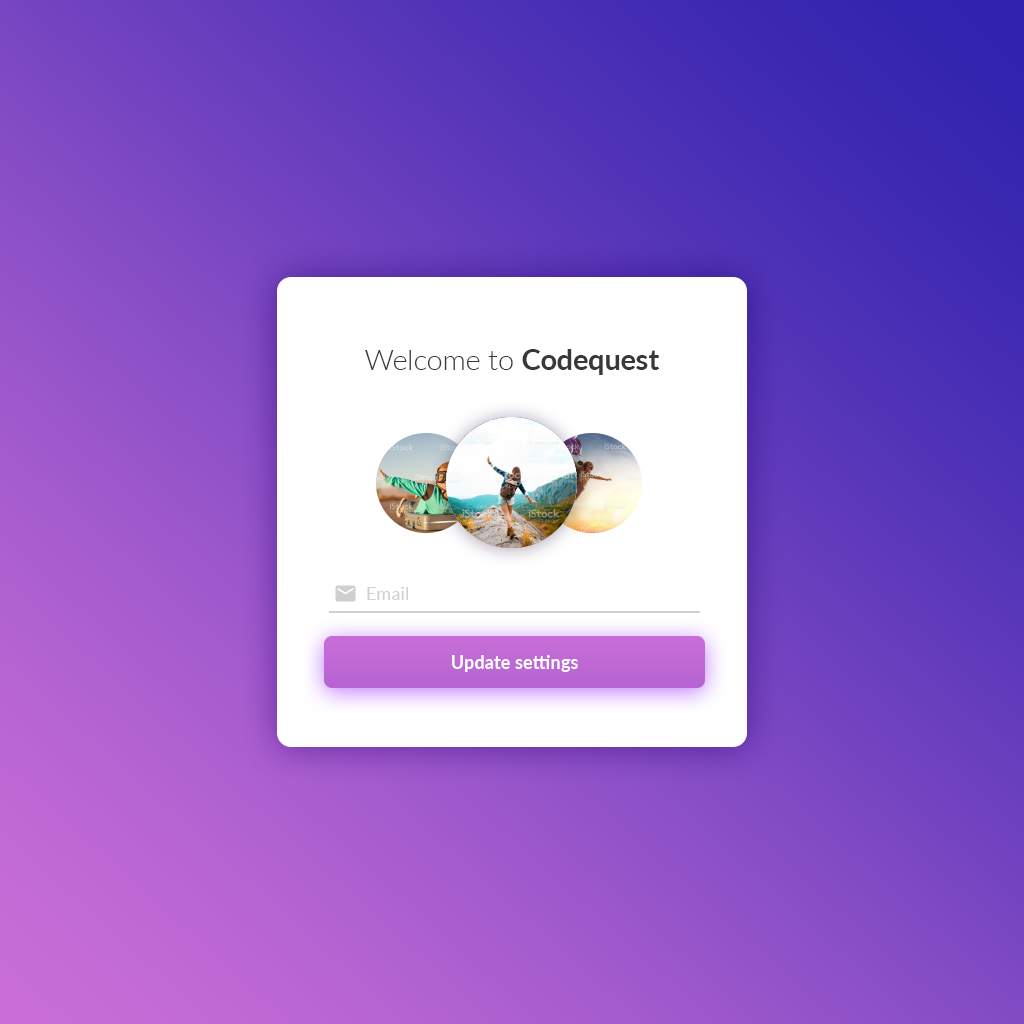
<style>
.page{position:relative;width:1024px;height:1024px}
.page>*{position:absolute;margin:0}
.t1{font:28px "Lato-Light";color:#383838}
.t2{font:28px "Lato-Bold";color:#383838}
.t3{font:18px "Lato-Regular";color:#cfcfcf}
.t4{font:18px "Lato-Bold";color:#ffffff}
</style>
<div class="page">
<p class="t1" style="left:365px;top:349px;width:295px;height:26px">Welcome to <span class="t2">Codequest</span></p>
<p class="t3" style="left:367px;top:587px;width:41px;height:13px">Email</p>
<p class="t4" style="left:452px;top:655px;width:126px;height:17px">Update settings</p>
</div>
